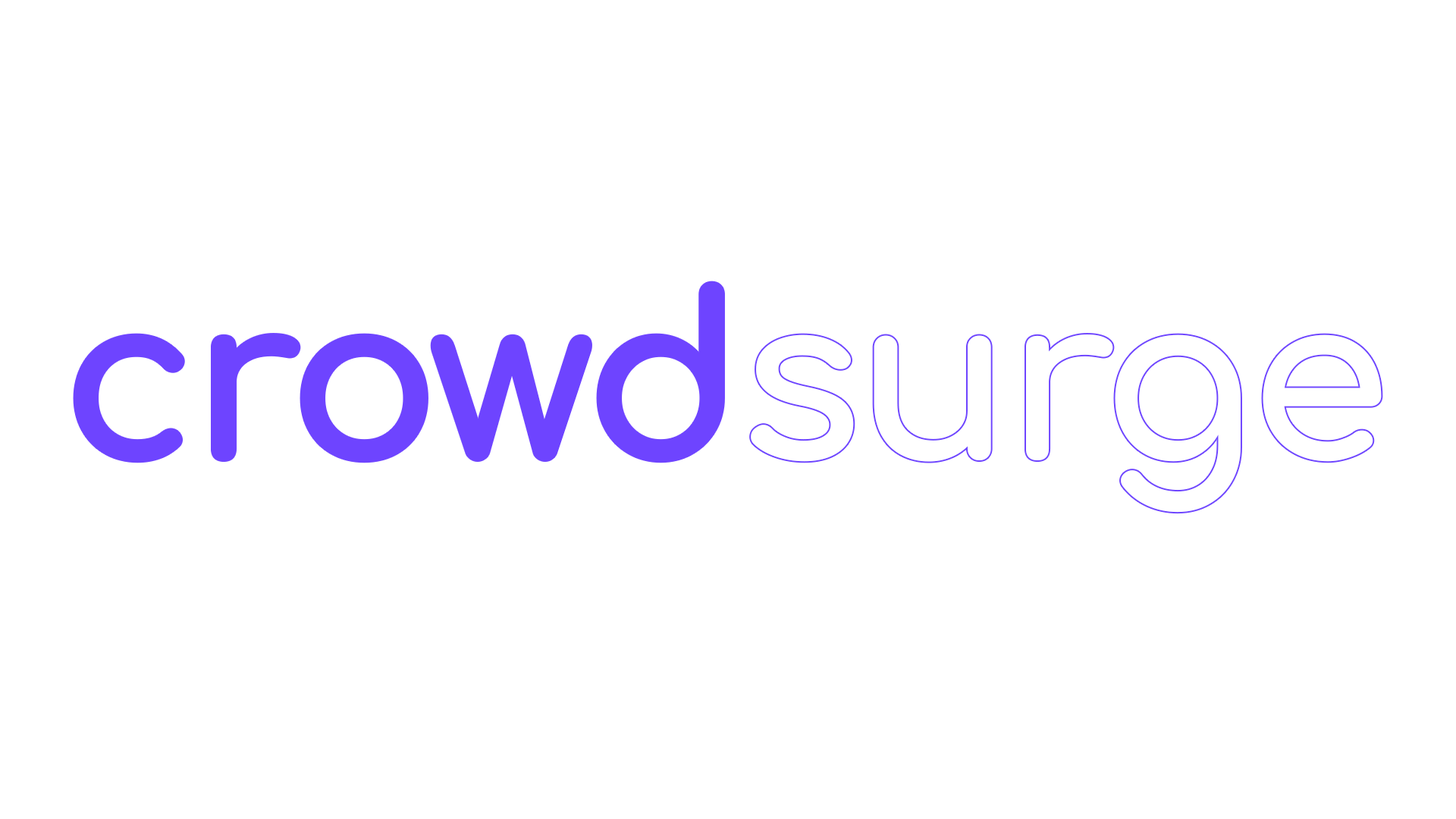
<style>
.page{position:relative;width:1456px;height:819px;background:#ffffff}
.page>*{position:absolute;margin:0}
.t1{font:227.5px "Comfortaa-Bold";letter-spacing:-0.025em;color:#6e44ff}
.t2{font:227.5px "Comfortaa-Bold";letter-spacing:-0.025em;color:#ffffff}
</style>
<div class="page">
<p class="t1" style="left:74px;top:282px;width:1308px;height:231px">crowd<span class="t2">surge</span></p>
</div>
